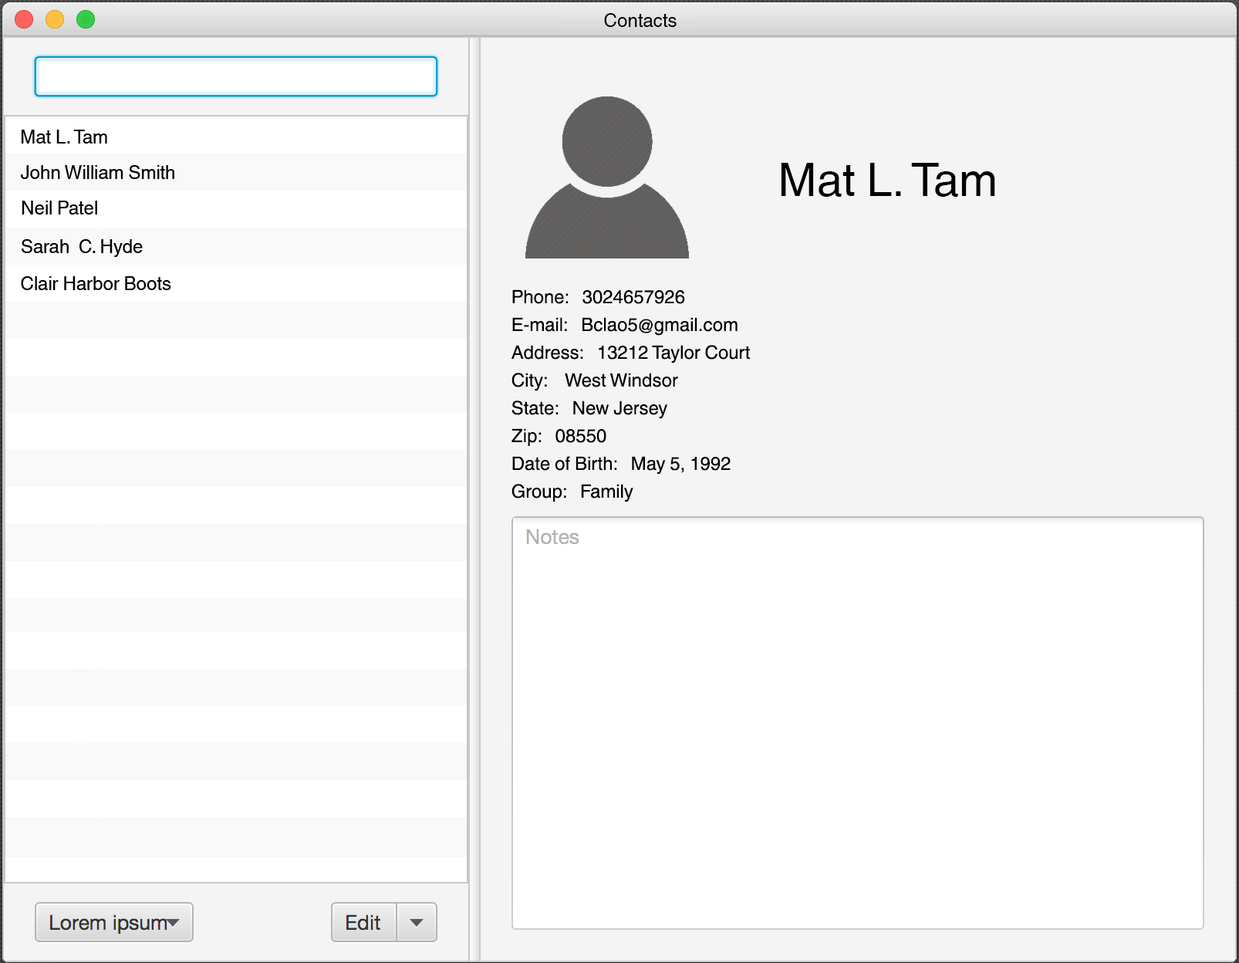
<style>
.page{position:relative;width:1239px;height:963px;background:#ffffff}
.page>*{position:absolute;margin:0}
.t1{font:18.5px "HelveticaWorld-Regular";color:#000000}
.t2{font:46.3px "HelveticaWorld-Regular";color:#000000}
.t3{font:9.3px/27.8px "HelveticaWorld-Regular";color:#000000}
</style>
<div class="page">
<p class="t1" style="left:604px;top:13px;width:72px;height:14px">Contacts</p>
<p class="t2" style="left:781px;top:163px;width:214px;height:34px">Mat L. Tam</p>
<p class="t3" style="left:511px;top:289px;width:239px;height:213px">Phone:   3024657926<br>E-mail:   Bclao5@gmail.com<br>Address:   13212 Taylor Court <br>City:    West Windsor<br>State:   New Jersey<br>Zip:   08550 <br>Date of Birth:   May 5, 1992<br>Group:   Family</p>
</div>
